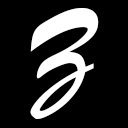
<style>
.page{position:relative;width:128px;height:128px;background:#000000}
.page>*{position:absolute;margin:0}
.t1{font:125px "BrushScriptMT";color:#ffffff}
</style>
<div class="page">
<p class="t1" style="left:30px;top:8px;width:69px;height:111px">Z</p>
</div>
